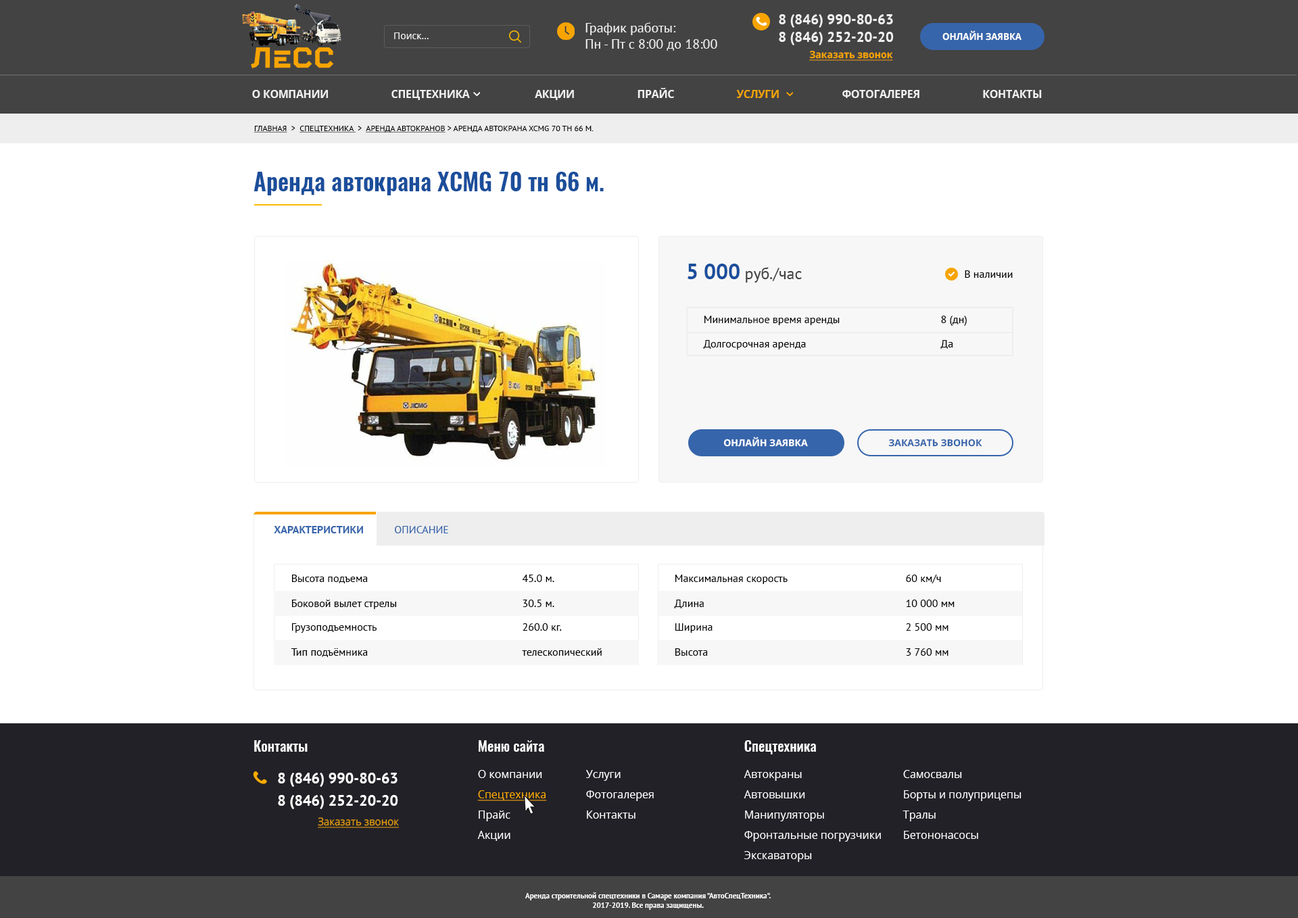
<style>
.page{position:relative;width:1298px;height:918px;background:#ffffff}
.page>*{position:absolute;margin:0}
.t1{font:14.2px/17.6px "PTSans-Bold";color:#f0f0f0}
.t2{font:13.5px "PTSans-Regular";color:#f0f0f0}
.t3{font:9.5px "OpenSans";color:#f0f0f0}
.t4{font:9.5px "OpenSans-Bold";color:#ffffff;text-transform:uppercase;scale:0.94 1}
.t5{font:10.1px "OpenSans-Bold";color:#f7a403;text-decoration:underline;scale:0.94 1}
.t6{font:10.5px "OpenSans-Bold";color:#f0f0f0;text-transform:uppercase}
.t7{font:10.5px "OpenSans-Bold";color:#f7a403;text-transform:uppercase}
.t8{font:8.1px "PTSans-Regular";color:#000000;text-transform:uppercase}
.t9{font:8.1px "PTSans-Regular";color:#000000;text-transform:uppercase;text-decoration:underline}
.t10{font:23.7px "Oswald-DemiBold";color:#1b4e9b}
.t11{font:16.2px "PTSans-Regular";color:#434343}
.t12{font:21.6px "PTSans-Bold";color:#1b4e9b}
.t13{font:10.8px "PTSans-Regular";color:#000000}
.t14{font:9.5px "OpenSans-Bold";color:#ffffff;text-transform:uppercase}
.t15{font:9.5px "OpenSans-Bold";color:#3665ab;text-transform:uppercase}
.t16{font:10.8px "PTSans-Bold";color:#3665ab;text-transform:uppercase}
.t17{font:10.8px "PTSans-Regular";color:#3665ab;text-transform:uppercase}
.t18{font:14.2px "Oswald-Medium";color:#ffffff}
.t19{font:14.9px/21.7px "PTSans-Bold";color:#ffffff}
.t20{font:10.8px/20.3px "OpenSans";color:#ffffff}
.t21{font:10.8px/20.3px "OpenSans";color:#f9aa02;text-decoration:underline}
.t22{font:10.8px "OpenSans";color:#df9b0b;text-decoration:underline;scale:0.94 1}
.t23{font:7.5px "PTSans-Bold";color:#ffffff}
</style>
<div class="page">
<p class="t1" style="left:779px;top:14px;width:115px;height:31px">8 (846) 990-80-63<br>8 (846) 252-20-20</p>
<p class="t2" style="left:586px;top:22px;width:132px;height:29px">График работы:<br>Пн - Пт с 8:00 до 18:00</p>
<p class="t3" style="left:394px;top:32px;width:35px;height:7px">Поиск...</p>
<p class="t4" style="left:943px;top:30px;width:79px;height:11px">онлайн заявка</p>
<p class="t5" style="left:809px;top:51px;width:84px;height:10px">Заказать звонок</p>
<p class="t6" style="left:252px;top:88px;width:790px;height:12px">О компании                       Спецтехника                        АКЦИИ                       Прайс                       <span class="t7">Услуги </span>                      Фотогалерея                       Контакты</p>
<p class="t8" style="left:254px;top:126px;width:340px;height:7px"><span class="t9">Главная</span>  &gt;  <span class="t9">Спецтехника </span> &gt;  <span class="t9">аренда автокранов</span> &gt; Аренда Автокрана XCMG 70 тн 66 м.</p>
<p class="t10" style="left:254px;top:172px;width:350px;height:23px">Аренда автокрана XCMG 70 тн 66 м.</p>
<p class="t11" style="left:688px;top:264px;width:114px;height:19px"><span class="t12">5 000</span> руб./час</p>
<p class="t13" style="left:965px;top:271px;width:48px;height:7px">В наличии</p>
<p class="t13" style="left:705px;top:316px;width:135px;height:9px">Минимальное время аренды</p>
<p class="t13" style="left:941px;top:316px;width:26px;height:10px">8 (дн)</p>
<p class="t13" style="left:703px;top:340px;width:103px;height:10px">Долгосрочная аренда</p>
<p class="t13" style="left:941px;top:340px;width:13px;height:9px">Да</p>
<p class="t14" style="left:724px;top:437px;width:84px;height:10px">Онлайн заявка</p>
<p class="t15" style="left:889px;top:439px;width:94px;height:8px">Заказать звонок</p>
<p class="t16" style="left:274px;top:526px;width:89px;height:8px">Характеристики</p>
<p class="t17" style="left:395px;top:526px;width:53px;height:8px">Описание</p>
<p class="t13" style="left:292px;top:575px;width:76px;height:9px">Высота подъема</p>
<p class="t13" style="left:522px;top:575px;width:33px;height:7px">45.0 м.</p>
<p class="t13" style="left:676px;top:575px;width:112px;height:9px">Максимальная скорость</p>
<p class="t13" style="left:906px;top:575px;width:35px;height:9px">60 км/ч</p>
<p class="t13" style="left:292px;top:600px;width:104px;height:9px">Боковой вылет стрелы</p>
<p class="t13" style="left:523px;top:600px;width:32px;height:7px">30.5 м.</p>
<p class="t13" style="left:674px;top:600px;width:30px;height:9px">Длина</p>
<p class="t13" style="left:906px;top:600px;width:49px;height:7px">10 000 мм</p>
<p class="t13" style="left:292px;top:624px;width:85px;height:9px">Грузоподъемность</p>
<p class="t13" style="left:523px;top:624px;width:39px;height:7px">260.0 кг.</p>
<p class="t13" style="left:676px;top:624px;width:37px;height:9px">Ширина</p>
<p class="t13" style="left:906px;top:624px;width:43px;height:7px">2 500 мм</p>
<p class="t13" style="left:291px;top:649px;width:77px;height:8px">Тип подъёмника</p>
<p class="t13" style="left:522px;top:649px;width:80px;height:7px">телескопический</p>
<p class="t13" style="left:676px;top:649px;width:32px;height:7px">Высота</p>
<p class="t13" style="left:906px;top:649px;width:43px;height:7px">3 760 мм</p>
<p class="t18" style="left:254px;top:741px;width:54px;height:11px">Контакты</p>
<p class="t18" style="left:479px;top:741px;width:65px;height:11px">Меню сайта</p>
<p class="t18" style="left:745px;top:741px;width:71px;height:14px">Спецтехника</p>
<p class="t19" style="left:278px;top:773px;width:120px;height:36px">8 (846) 990-80-63<br>8 (846) 252-20-20</p>
<p class="t20" style="left:477px;top:770px;width:70px;height:71px">О компании<br><span class="t21">Спецтехника<br></span>Прайс <br>Акции</p>
<p class="t20" style="left:586px;top:770px;width:68px;height:49px">Услуги<br>Фотогалерея<br>Контакты</p>
<p class="t20" style="left:744px;top:770px;width:137px;height:92px">Автокраны<br>Автовышки<br>Манипуляторы<br>Фронтальные погрузчики<br>Экскаваторы</p>
<p class="t20" style="left:903px;top:770px;width:119px;height:69px">Самосвалы<br>Борты и полуприцепы<br>Тралы<br>Бетононасосы</p>
<p class="t22" style="left:318px;top:818px;width:82px;height:10px">Заказать звонок</p>
<p class="t23" style="left:525px;top:893px;width:246px;height:17px;text-align:center">Аренда строительной спецтехники в Самаре компания "АвтоСпецТехника".<br>2017-2019. Все права защищены.</p>
</div>
